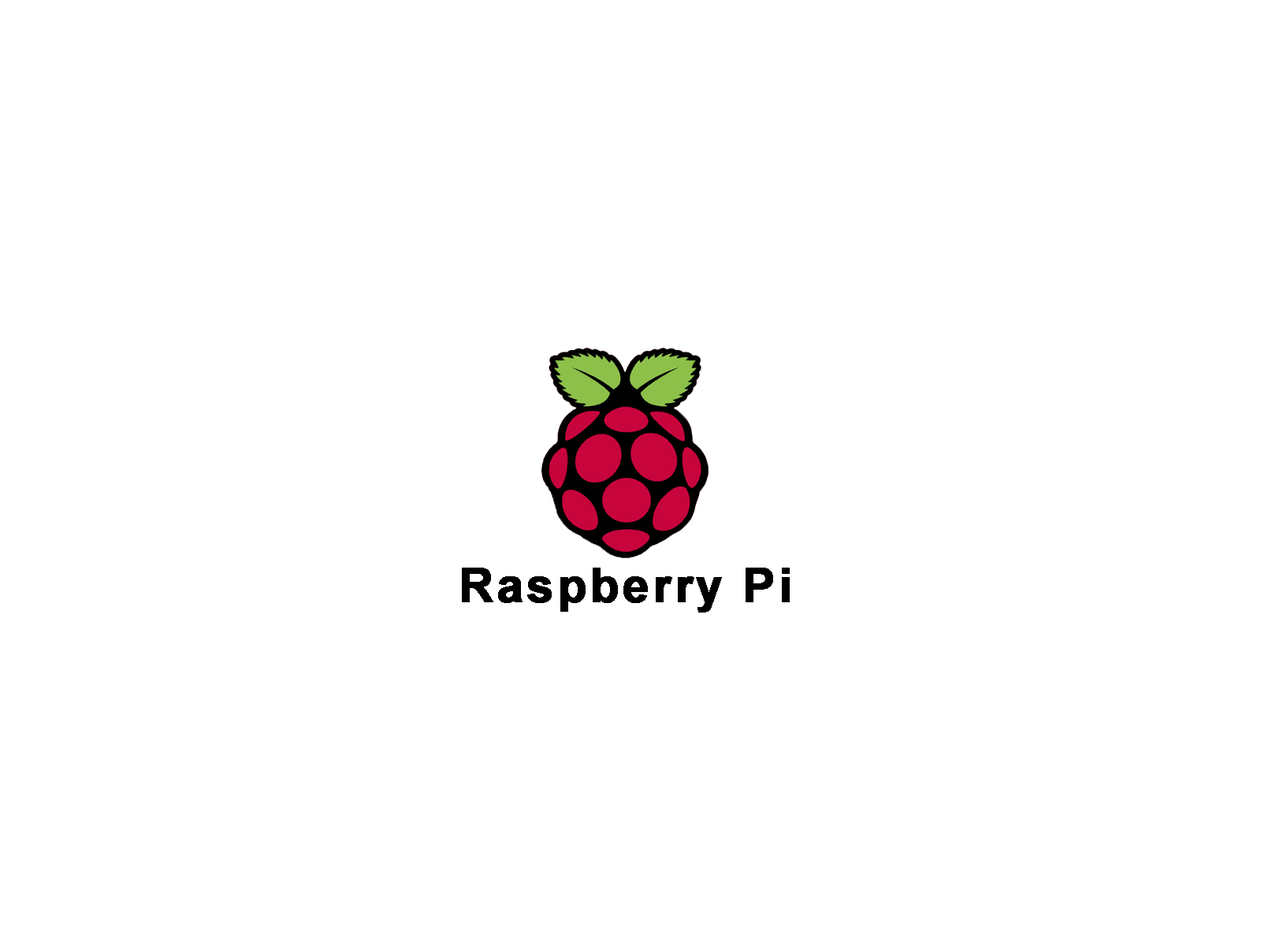
<style>
.page{position:relative;width:1261px;height:946px;background:#ffffff}
.page>*{position:absolute;margin:0}
.t1{font:47.3px "Arial-BoldMT";letter-spacing:0.05em;color:#000000;font-weight:bold}
</style>
<div class="page">
<p class="t1" style="left:462px;top:567px;width:328px;height:45px">Raspberry Pi</p>
</div>
